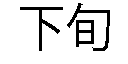
<style>
.page{position:relative;width:128px;height:64px;background:#ffffff}
.page>*{position:absolute;margin:0}
.t1{font:52.8px "KozGoPr6N-Regular";color:#000000;scale:0.91 1}
</style>
<div class="page">
<p class="t1" style="left:20px;top:3px;width:90px;height:48px">下旬</p>
</div>
